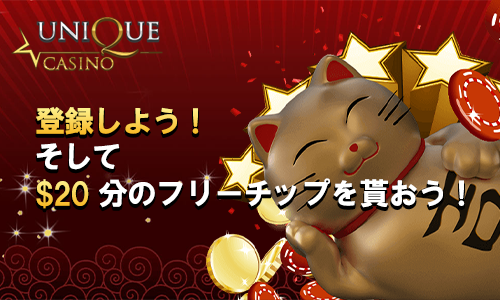
<style>
.page{position:relative;width:500px;height:300px}
.page>*{position:absolute;margin:0}
.t1{font:30.6px "HGSSoeiKakugothicUB";letter-spacing:-0.05em;text-transform:uppercase}
.t2{font:30.6px "HGSSoeiKakugothicUB";letter-spacing:-0.05em;color:#ffffff;text-transform:uppercase}
.t3{font:30.6px "HGSSoeiKakugothicUB";letter-spacing:-0.05em;color:#dabe4b;text-transform:uppercase}
</style>
<div class="page">
<p class="t1" style="left:36px;top:107px;width:163px;height:28px">登録しよう！</p>
<p class="t2" style="left:36px;top:143px;width:429px;height:65px"><span class="t3"><br></span>そして<br>  分のフリーチップを貰おう！</p>
<p class="t1" style="left:36px;top:179px;width:53px;height:30px">$20</p>
</div>
